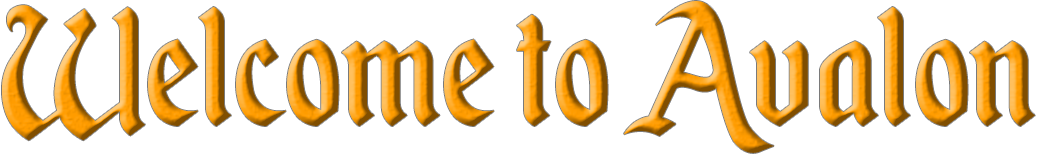
<style>
.page{position:relative;width:1038px;height:155px;background:#ffffff}
.page>*{position:absolute;margin:0}
.t1{font:200px "EnchantedLand"}
</style>
<div class="page">
<p class="t1" style="left:2px;top:1px;width:1033px;height:152px">Welcome to Avalon</p>
</div>
